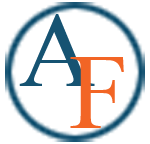
<style>
.page{position:relative;width:150px;height:144px;background:#ffffff}
.page>*{position:absolute;margin:0}
.t1{font:105.8px "TimesNewRomanPSMT";color:#165372}
.t2{font:105.8px "TimesNewRomanPSMT";color:#f26525}
</style>
<div class="page">
<p class="t1" style="left:19px;top:14px;width:76px;height:72px">A</p>
<p class="t2" style="left:70px;top:57px;width:54px;height:71px">F</p>
</div>
